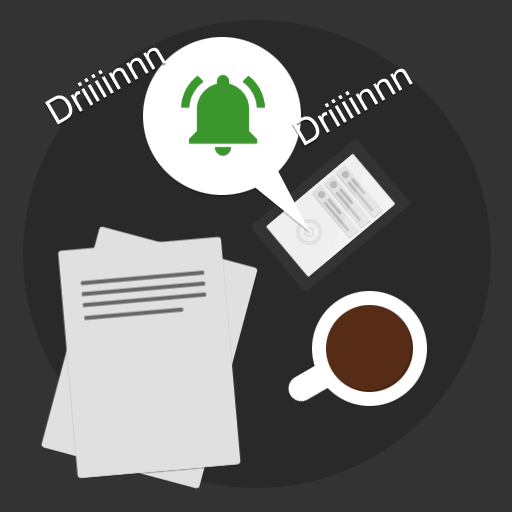
<style>
.page{position:relative;width:512px;height:512px;background:#333333}
.page>*{position:absolute;margin:0}
.t1{font:36px "ArialMT";color:#efefef}
</style>
<div class="page">
<p class="t1" style="left:45px;top:47px;width:121px;height:78px;rotate:-30deg">Driiiinnn</p>
<p class="t1" style="left:292px;top:68px;width:121px;height:78px;rotate:-30deg">Driiiinnn</p>
</div>
